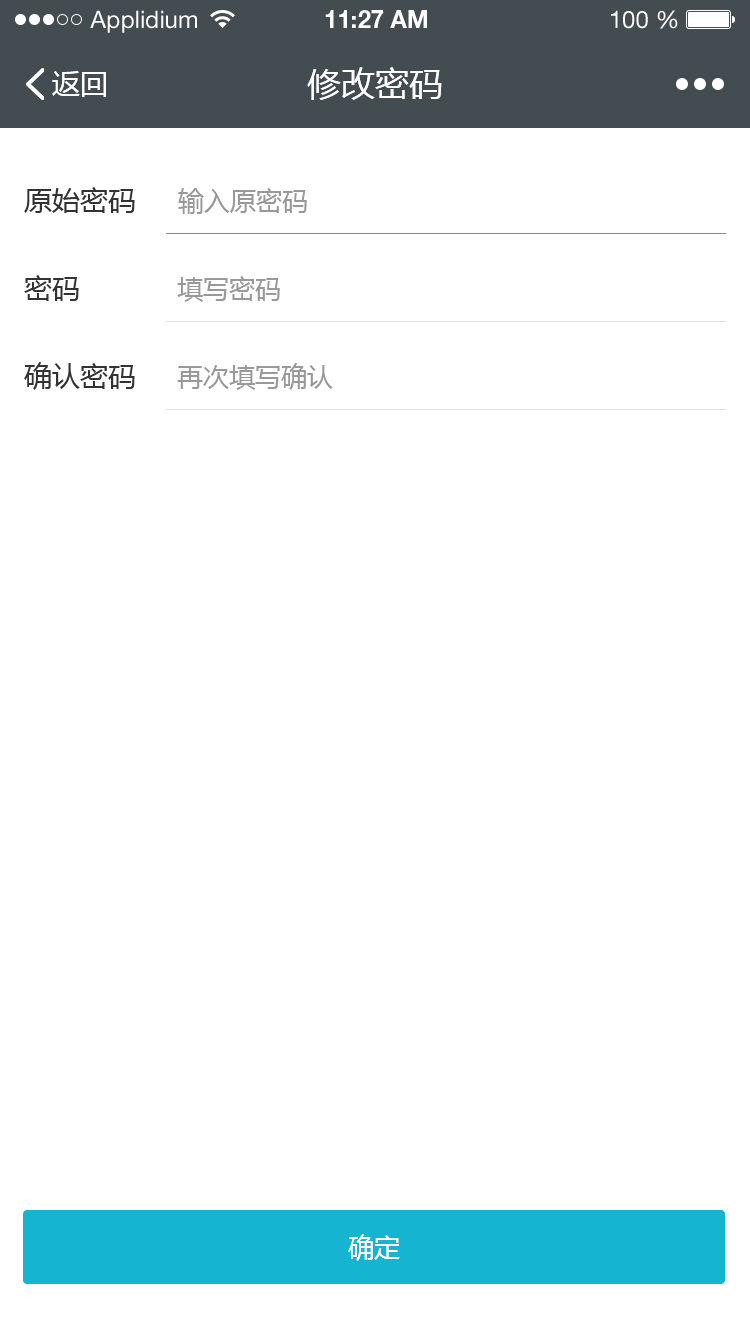
<style>
.page{position:relative;width:750px;height:1334px;background:#ffffff}
.page>*{position:absolute;margin:0}
.t1{font:24px "HelveticaNeueLTStd-Roman";color:#ffffff}
.t2{font:24px "HelveticaNeueLTStd-Bd";color:#ffffff}
.t3{font:28px "MicrosoftYaHei";color:#ffffff}
.t4{font:34px "MicrosoftYaHei";color:#ffffff}
.t5{font:28px "MicrosoftYaHei";color:#333333}
.t6{font:26px "MicrosoftYaHei";color:#999999}
.t7{font:26px "MicrosoftYaHei";color:#ffffff}
</style>
<div class="page">
<p class="t1" style="left:90px;top:10px;width:107px;height:23px">Applidium</p>
<p class="t2" style="left:325px;top:10px;width:102px;height:18px">11:27 AM</p>
<p class="t1" style="left:611px;top:10px;width:67px;height:19px">100 %</p>
<p class="t3" style="left:52px;top:71px;width:54px;height:26px">返回</p>
<p class="t4" style="left:307px;top:67px;width:135px;height:33px">修改密码</p>
<p class="t5" style="left:24px;top:187px;width:111px;height:26px">原始密码</p>
<p class="t6" style="left:178px;top:188px;width:129px;height:26px">输入原密码</p>
<p class="t5" style="left:24px;top:275px;width:55px;height:26px">密码</p>
<p class="t6" style="left:177px;top:276px;width:103px;height:26px">填写密码</p>
<p class="t5" style="left:24px;top:362px;width:111px;height:28px">确认密码</p>
<p class="t6" style="left:177px;top:363px;width:156px;height:27px">再次填写确认</p>
<p class="t7" style="left:348px;top:1234px;width:52px;height:27px">确定</p>
</div>
